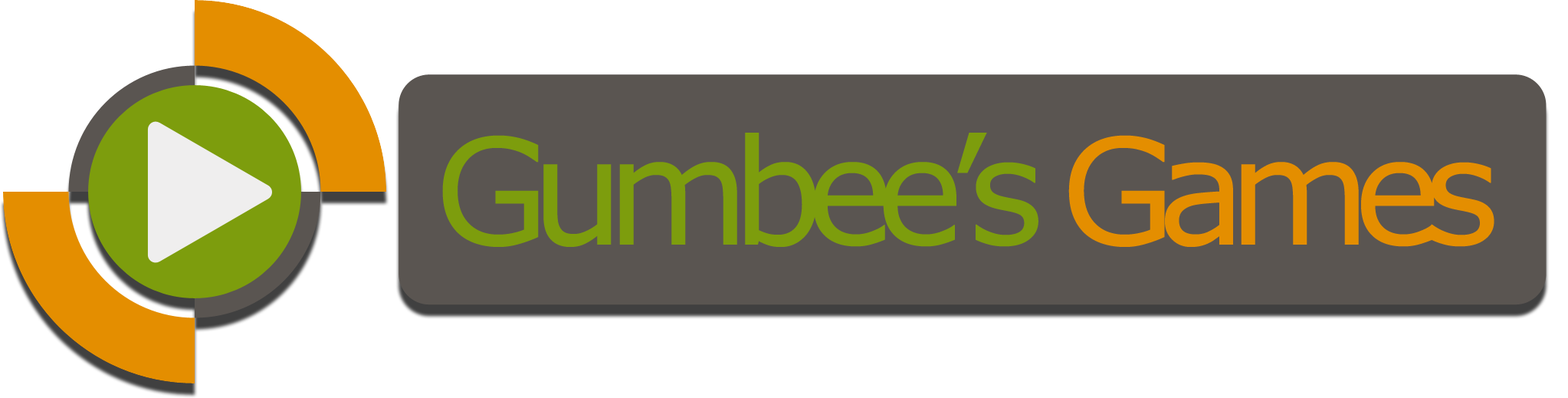
<style>
.page{position:relative;width:1568px;height:398px;background:#ffffff}
.page>*{position:absolute;margin:0}
.t1{font:147.1px "Verdana";letter-spacing:-0.12em;color:#7d9d0d}
.t2{font:147.1px "Verdana";letter-spacing:-0.12em;color:#e48e00}
</style>
<div class="page">
<p class="t1" style="left:442px;top:133px;width:1052px;height:114px">Gumbee’s <span class="t2">Games</span></p>
</div>
